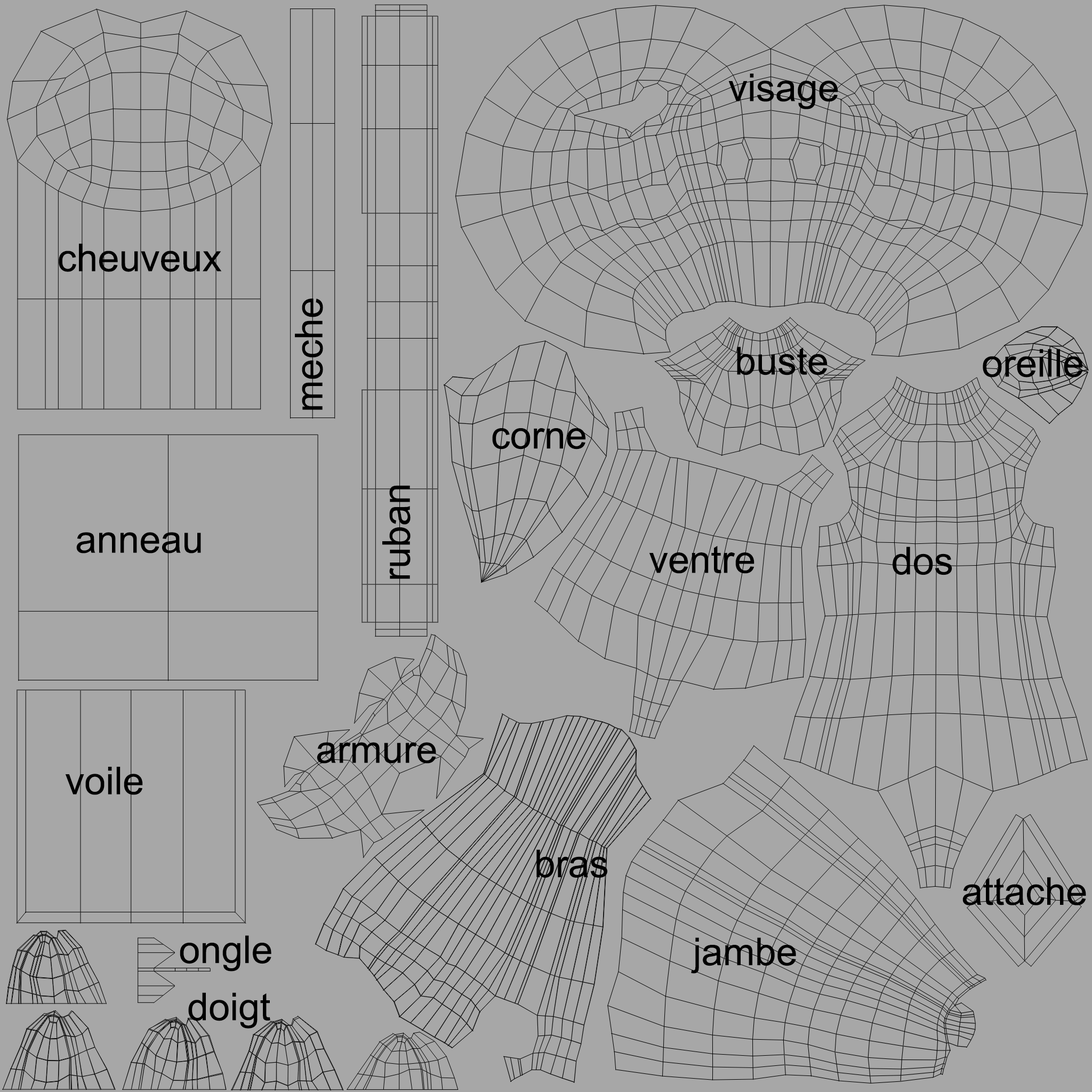
<style>
.page{position:relative;width:1092px;height:1092px;background:#a7a7a7}
.page>*{position:absolute;margin:0}
.t1{font:38.4px "ArialMT";color:#000000}
.t2{font:38.3px "ArialMT";color:#000000}
</style>
<div class="page">
<p class="t1" style="left:728px;top:74px;width:110px;height:35px">visage</p>
<p class="t1" style="left:59px;top:244px;width:163px;height:28px">cheuveux</p>
<p class="t2" style="left:295px;top:298px;width:28px;height:112px;rotate:-90deg">meche</p>
<p class="t1" style="left:737px;top:347px;width:91px;height:28px">buste</p>
<p class="t1" style="left:983px;top:349px;width:100px;height:29px">oreille</p>
<p class="t1" style="left:492px;top:428px;width:93px;height:21px">corne</p>
<p class="t2" style="left:382px;top:485px;width:29px;height:94px;rotate:-90deg">ruban</p>
<p class="t1" style="left:76px;top:532px;width:125px;height:21px">anneau</p>
<p class="t1" style="left:649px;top:545px;width:105px;height:29px">ventre</p>
<p class="t1" style="left:893px;top:547px;width:59px;height:28px">dos</p>
<p class="t1" style="left:317px;top:742px;width:119px;height:22px">armure</p>
<p class="t1" style="left:66px;top:767px;width:77px;height:28px">voile</p>
<p class="t1" style="left:536px;top:849px;width:71px;height:29px">bras</p>
<p class="t1" style="left:962px;top:877px;width:124px;height:28px">attache</p>
<p class="t1" style="left:180px;top:935px;width:91px;height:36px">ongle</p>
<p class="t1" style="left:691px;top:937px;width:105px;height:37px">jambe</p>
<p class="t1" style="left:188px;top:992px;width:82px;height:37px">doigt</p>
</div>
